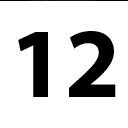
<style>
.page{position:relative;width:128px;height:128px;background:#ffffff}
.page>*{position:absolute;margin:0}
.t1{font:99.7px "MyriadHebrew-Bold";color:#000000}
</style>
<div class="page">
<p class="t1" style="left:18px;top:30px;width:98px;height:66px">12</p>
</div>
